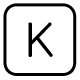
<style>
.page{position:relative;width:80px;height:80px;background:#ffffff}
.page>*{position:absolute;margin:0}
.t1{font:48px "NanumSquareRoundR";color:#000000}
</style>
<div class="page">
<p class="t1" style="left:28px;top:22px;width:25px;height:35px">K</p>
</div>
